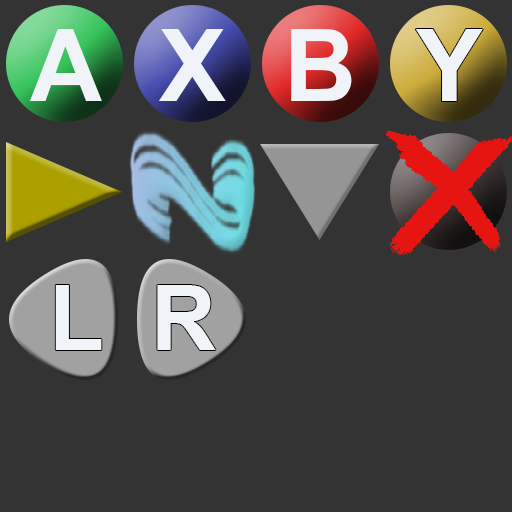
<style>
.page{position:relative;width:512px;height:512px;background:#333333}
.page>*{position:absolute;margin:0}
.t1{font:100px "Arial-BoldMT";color:#f0f4f8}
.t2{font:90px "Arial-BoldMT";color:#f0f4f8}
</style>
<div class="page">
<p class="t1" style="left:30px;top:29px;width:72px;height:72px">A</p>
<p class="t1" style="left:159px;top:29px;width:67px;height:72px">X</p>
<p class="t1" style="left:291px;top:29px;width:61px;height:72px">B</p>
<p class="t1" style="left:415px;top:29px;width:68px;height:72px">Y</p>
<p class="t2" style="left:55px;top:285px;width:47px;height:65px">L</p>
<p class="t2" style="left:157px;top:285px;width:59px;height:65px">R</p>
</div>
